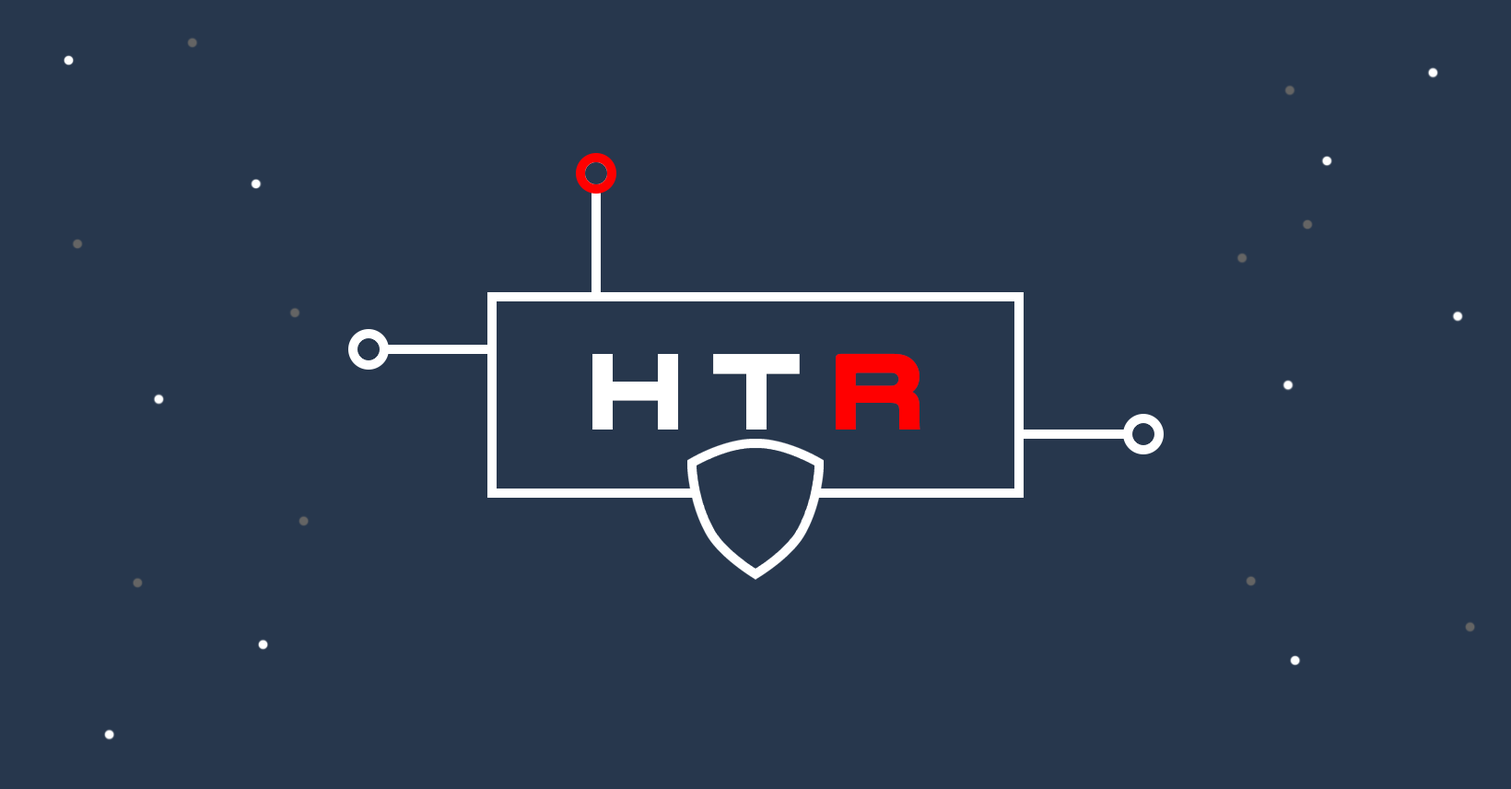
<style>
.page{position:relative;width:1511px;height:789px;background:#27374d}
.page>*{position:absolute;margin:0}
.t1{font:111.3px "NulshockRg-Bold";letter-spacing:0.25em;color:#ffffff;text-transform:uppercase}
.t2{font:111.3px "NulshockRg-Bold";letter-spacing:0.25em;color:#ff0000;text-transform:uppercase}
</style>
<div class="page">
<p class="t1" style="left:593px;top:353px;width:328px;height:76px">ht<span class="t2">r</span></p>
</div>
